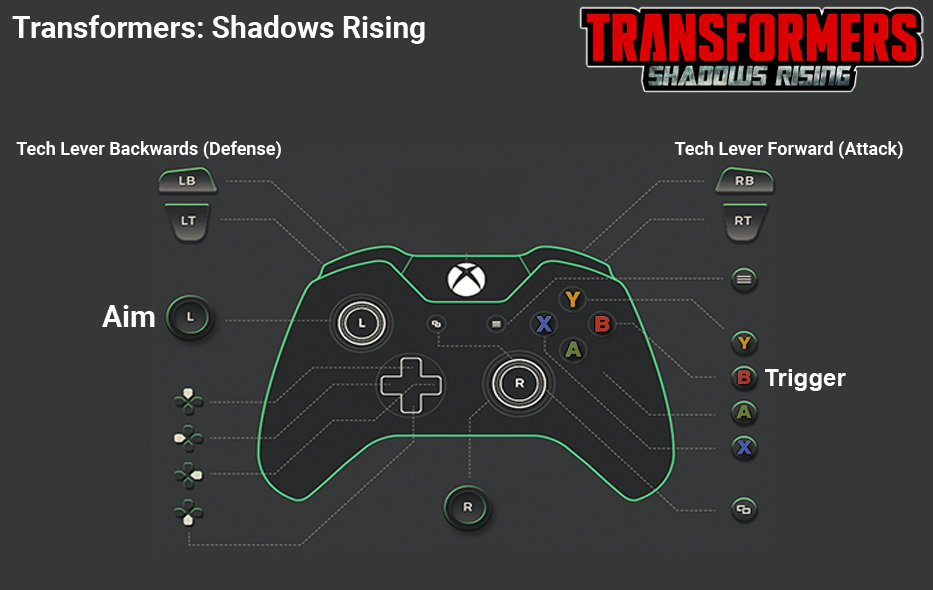
<style>
.page{position:relative;width:933px;height:590px;background:#363838}
.page>*{position:absolute;margin:0}
.t1{font:30px "Roboto-Bold";color:#ffffff}
.t2{font:18px "Roboto-Bold";color:#ffffff}
.t3{font:30px "Roboto-Bold";color:#fefefe}
.t4{font:24px "Arial-BoldMT";color:#fefefe}
</style>
<div class="page">
<p class="t1" style="left:12px;top:15px;width:413px;height:29px">Transformers: Shadows Rising</p>
<p class="t2" style="left:16px;top:141px;width:265px;height:18px">Tech Lever Backwards (Defense)</p>
<p class="t2" style="left:674px;top:141px;width:229px;height:18px">Tech Lever Forward (Attack)</p>
<p class="t3" style="left:102px;top:305px;width:53px;height:22px">Aim</p>
<p class="t4" style="left:765px;top:369px;width:81px;height:22px">Trigger</p>
</div>
